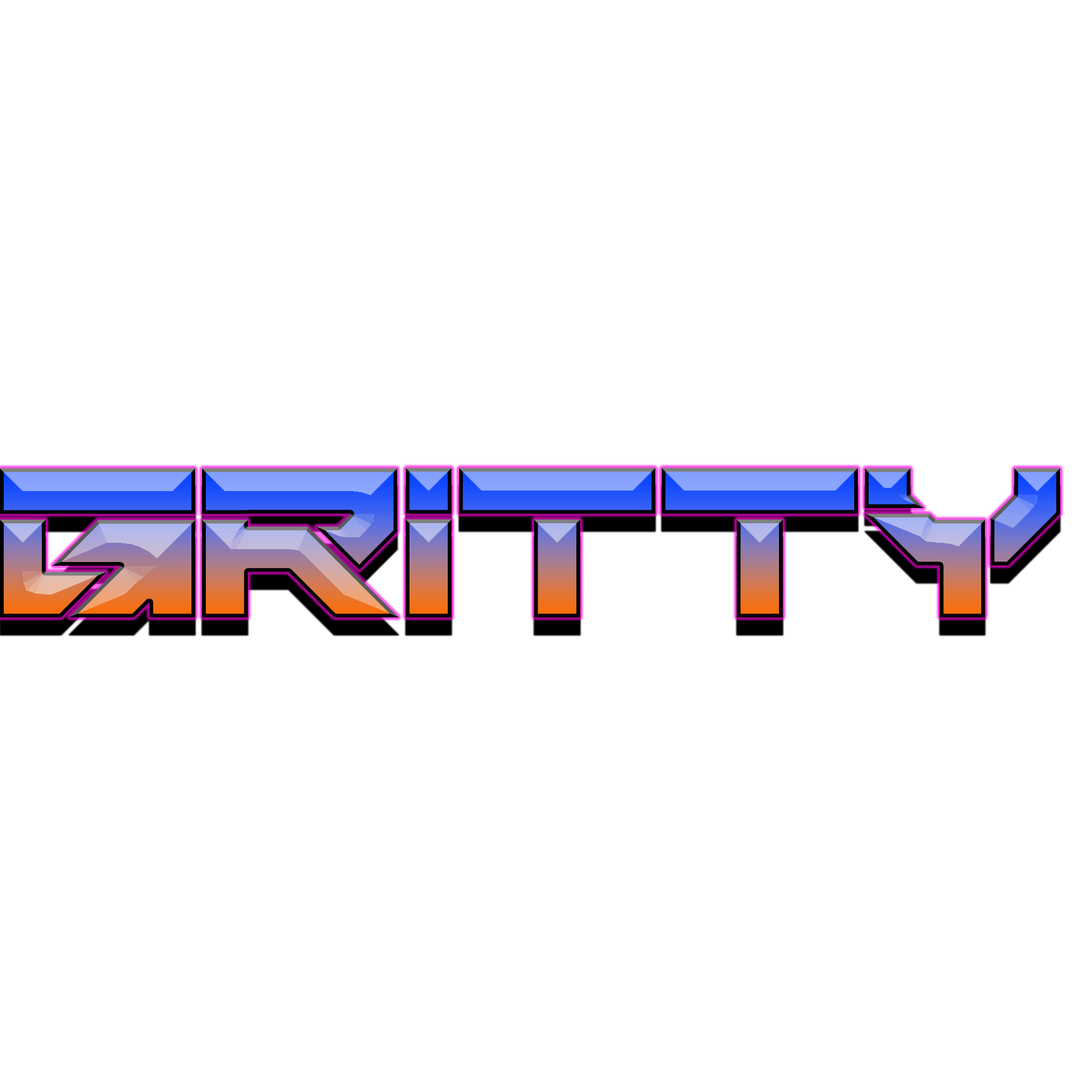
<style>
.page{position:relative;width:1092px;height:1092px;background:#ffffff}
.page>*{position:absolute;margin:0}
.t1{font:213.3px "Rektec"}
</style>
<div class="page">
<p class="t1" style="left:0px;top:468px;width:1060px;height:149px">Gritty</p>
</div>
